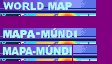
<style>
.page{position:relative;width:112px;height:64px;background:#800080}
.page>*{position:absolute;margin:0}
.t1{font:10.7px "Arial-Black";color:#a5ffef;scale:0.91 1}
</style>
<div class="page">
<p class="t1" style="left:2px;top:47px;width:70px;height:8px">MAPA-MUNDI</p>
</div>
